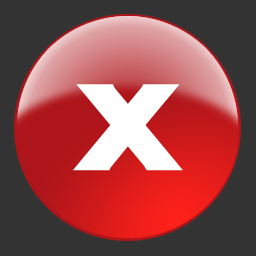
<style>
.page{position:relative;width:256px;height:256px;background:#333333}
.page>*{position:absolute;margin:0}
.t1{font:121.6px "DFGothic-UB-WINP-RKSJ-H";color:#ffffff;scale:1.22 1}
</style>
<div class="page">
<p class="t1" style="left:73px;top:84px;width:110px;height:87px">X</p>
</div>
